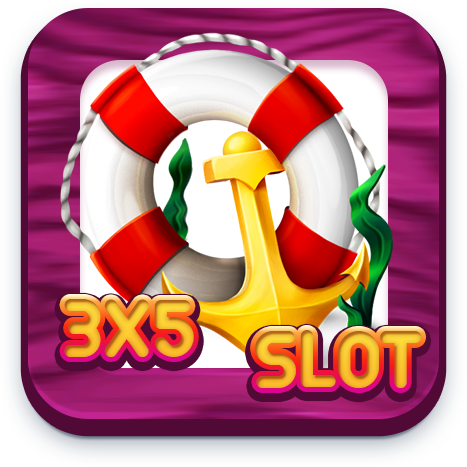
<style>
.page{position:relative;width:467px;height:467px}
.page>*{position:absolute;margin:0}
.t1{font:90px "Arista";text-transform:uppercase}
</style>
<div class="page">
<p class="t1" style="left:64px;top:299px;width:130px;height:58px">3x5</p>
<p class="t1" style="left:255px;top:330px;width:166px;height:58px">slot</p>
</div>
